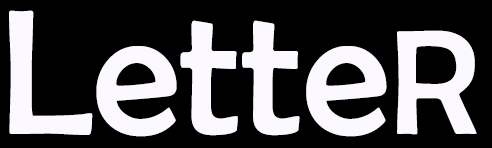
<style>
.page{position:relative;width:492px;height:148px;background:#000000}
.page>*{position:absolute;margin:0}
.t1{font:180px "BerlinSansFB-Reg";color:#fcf8ff}
.t2{font:150px "BerlinSansFB-Reg";color:#fcf8ff}
</style>
<div class="page">
<p class="t1" style="left:9px;top:10px;width:468px;height:127px">Lette<span class="t2">R</span></p>
</div>
